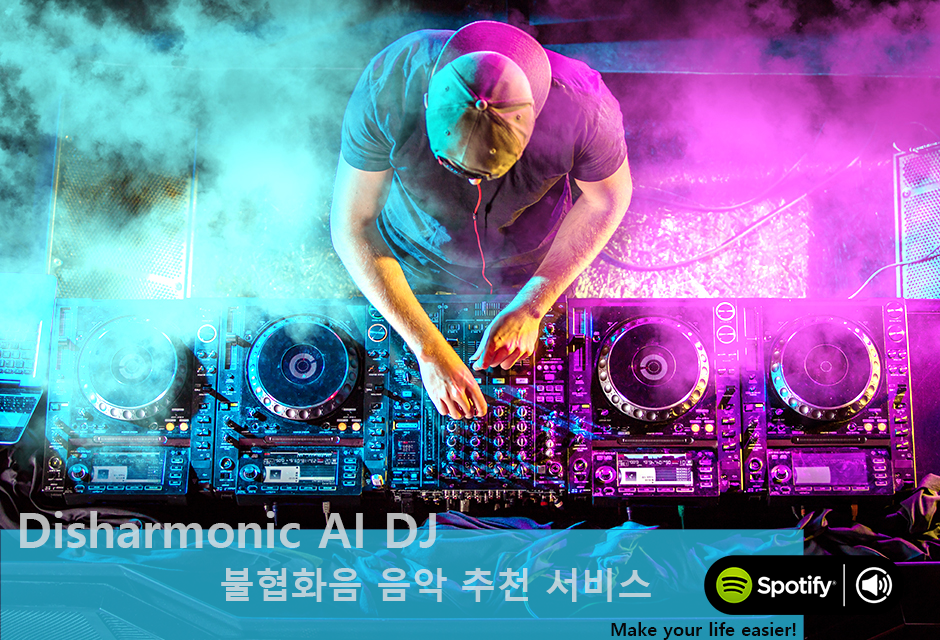
<style>
.page{position:relative;width:940px;height:640px}
.page>*{position:absolute;margin:0}
.t1{font:48px "MalgunGothicBold"}
.t2{font:36px "MalgunGothicBold";color:#b8cfd8}
.t3{font:18px "MalgunGothicBold";color:#070607}
</style>
<div class="page">
<p class="t1" style="left:20px;top:511px;width:416px;height:37px">Disharmonic AI DJ</p>
<p class="t2" style="left:221px;top:568px;width:430px;height:34px">불협화음 음악 추천 서비스</p>
<p class="t3" style="left:611px;top:622px;width:185px;height:18px">Make your life easier!</p>
</div>
